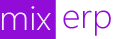
<style>
.page{position:relative;width:120px;height:39px;background:#ffffff}
.page>*{position:absolute;margin:0}
.t1{font:34px "SegoeUI-Light";color:#f9f4fb;scale:1.07 1}
.t2{font:34px "SegoeUI-Light";color:#920cd8;scale:1.07 1}
</style>
<div class="page">
<p class="t1" style="left:2px;top:6px;width:49px;height:24px">mix</p>
<p class="t2" style="left:63px;top:10px;width:48px;height:26px">erp</p>
</div>
